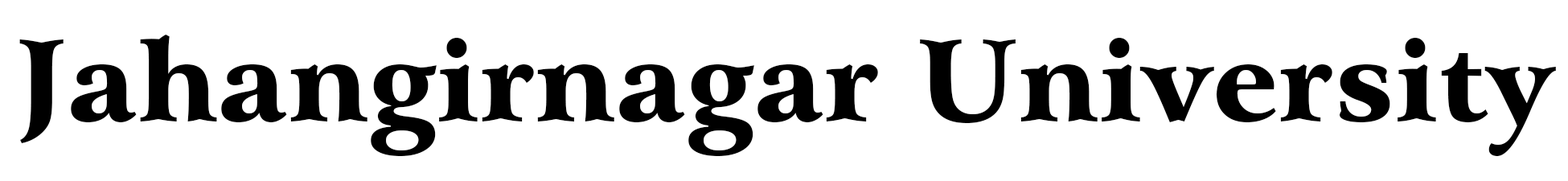
<style>
.page{position:relative;width:1568px;height:181px;background:#ffffff}
.page>*{position:absolute;margin:0}
.t1{font:113px "ArrusBT-Black";color:#000000}
</style>
<div class="page">
<p class="t1" style="left:19px;top:35px;width:1537px;height:121px">Jahangirnagar University</p>
</div>
